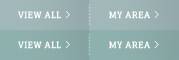
<style>
.page{position:relative;width:179px;height:60px}
.page>*{position:absolute;margin:0}
.t1{font:8.4px "Glegoo-Regular";letter-spacing:0.07em;color:#ffffff}
</style>
<div class="page">
<p class="t1" style="left:18px;top:11px;width:43px;height:8px">VIEW ALL</p>
<p class="t1" style="left:109px;top:11px;width:41px;height:8px">MY AREA</p>
<p class="t1" style="left:18px;top:41px;width:43px;height:8px">VIEW ALL</p>
<p class="t1" style="left:109px;top:41px;width:41px;height:8px">MY AREA</p>
</div>
